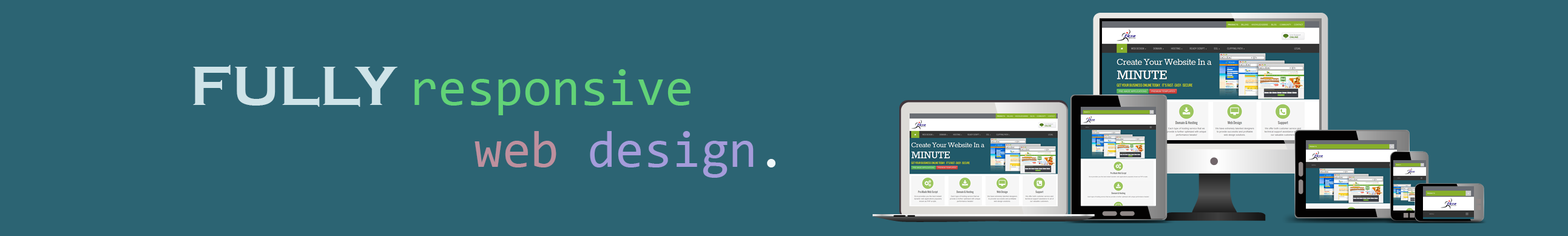
<style>
.page{position:relative;width:1568px;height:236px;background:#2c6473}
.page>*{position:absolute;margin:0}
.t1{font:51.6px "Consolas";color:#62d377}
.t2{font:57.6px "CopperplateGothic-Bold";color:#cee3e8}
.t3{font:51.6px "Consolas";color:#be909e}
.t4{font:51.6px "Consolas";color:#a59cdb}
.t5{font:51.6px "Consolas";color:#f0f8fa}
</style>
<div class="page">
<p class="t1" style="left:193px;top:65px;width:583px;height:113px"><span class="t2">FULLY </span>responsive <br>          <span class="t3">web </span><span class="t4">design</span><span class="t5">.</span></p>
</div>
